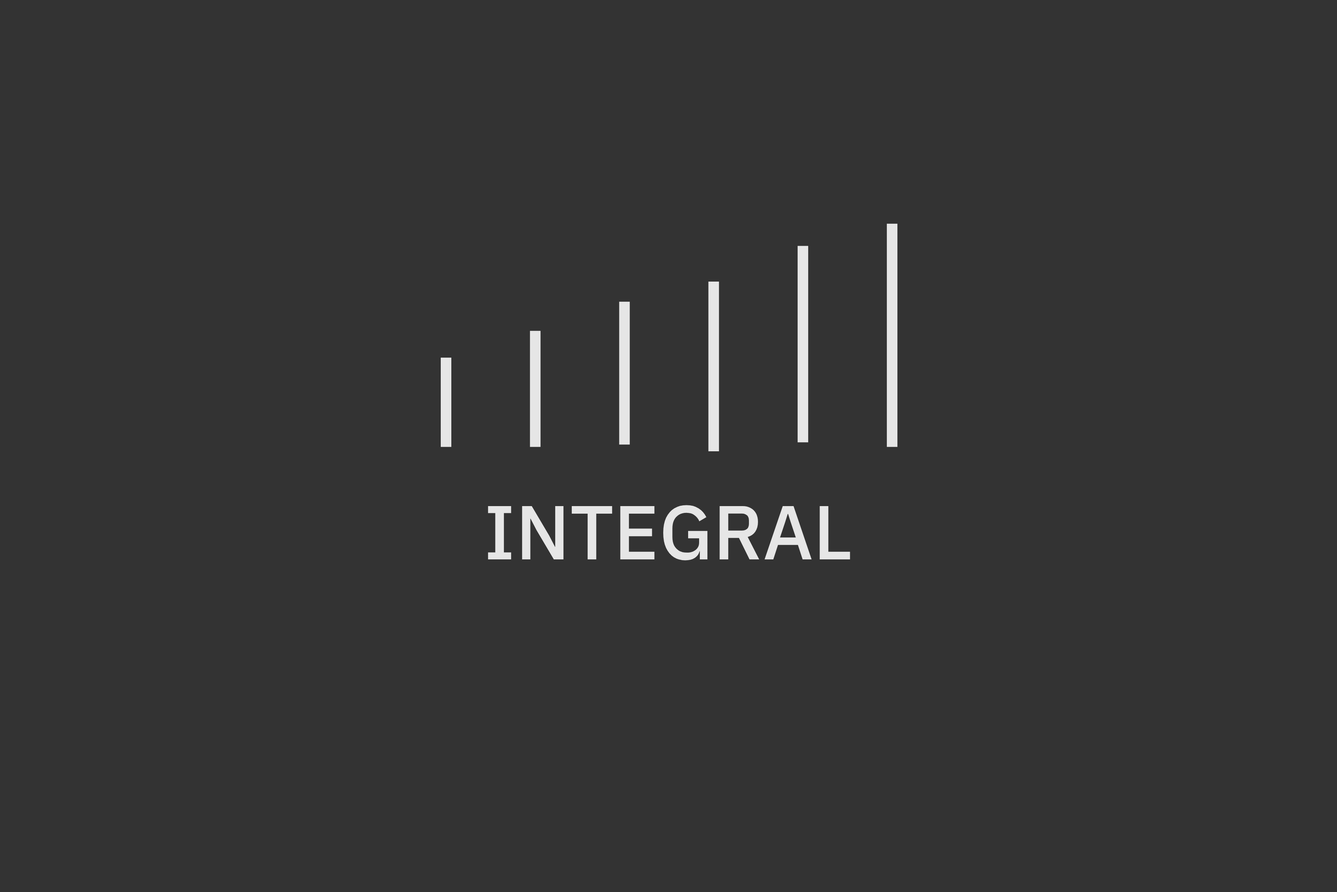
<style>
.page{position:relative;width:1337px;height:892px;background:#333333}
.page>*{position:absolute;margin:0}
.t1{font:76.4px "IBMPlexSans-Medium";color:#e6e6e6}
</style>
<div class="page">
<p class="t1" style="left:488px;top:505px;width:362px;height:55px">INTEGRAL</p>
</div>
